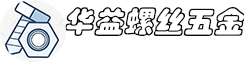
<style>
.page{position:relative;width:244px;height:62px;background:#ffffff}
.page>*{position:absolute;margin:0}
.t1{font:30px "STCaiyun";color:#0b0a0a;font-style:italic}
</style>
<div class="page">
<p class="t1" style="left:65px;top:7px;width:181px;height:29px">华益螺丝五金</p>
</div>
